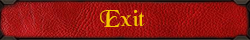
<style>
.page{position:relative;width:250px;height:40px}
.page>*{position:absolute;margin:0}
.t1{font:24px "BlackChancery";color:#f6c503}
</style>
<div class="page">
<p class="t1" style="left:100px;top:10px;width:45px;height:17px">Exit</p>
</div>
